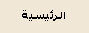
<style>
.page{position:relative;width:89px;height:33px;background:#f0e7d6}
.page>*{position:absolute;margin:0}
.t1{font:11px "Tahoma-Bold";color:#000000}
</style>
<div class="page">
<p class="t1" style="left:22px;top:10px;width:43px;height:11px">الرئيسية</p>
</div>
